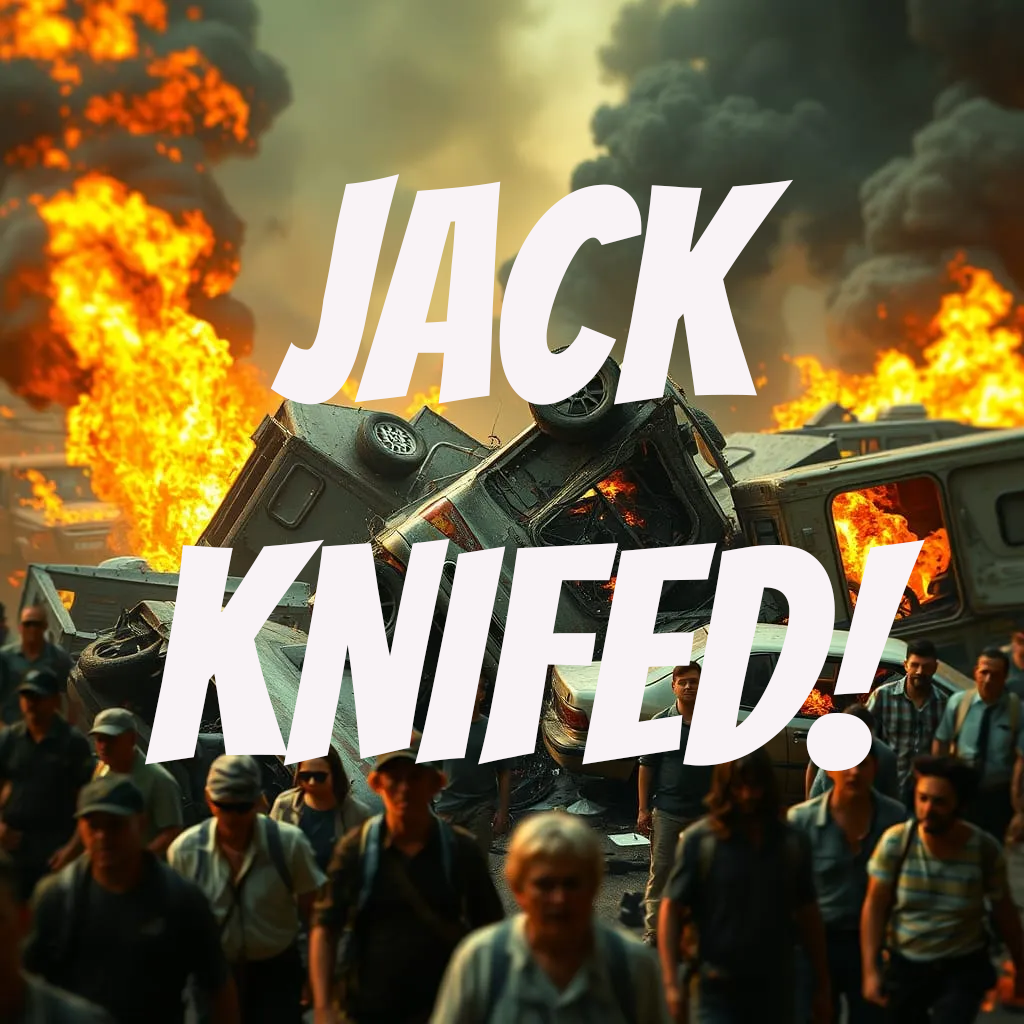
<style>
.page{position:relative;width:1024px;height:1024px}
.page>*{position:absolute;margin:0}
.t1{font:300px "Bangers-Regular";color:#f9f3f6;text-transform:uppercase}
</style>
<div class="page">
<p class="t1" style="left:145px;top:174px;width:780px;height:597px;text-align:center">Jack<br>Knifed!</p>
</div>
